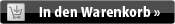
<style>
.page{position:relative;width:175px;height:24px;background:#4d4d4d}
.page>*{position:absolute;margin:0}
.t1{font:13px "KozGoPro-Heavy";letter-spacing:0.01em;color:#fefefe}
</style>
<div class="page">
<p class="t1" style="left:39px;top:6px;width:121px;height:11px">In den Warenkorb »</p>
</div>
